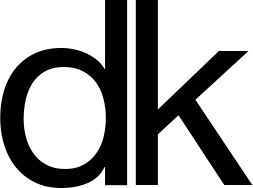
<style>
.page{position:relative;width:253px;height:188px;background:#ffffff}
.page>*{position:absolute;margin:0}
.t1{font:258.6px "HelveticaNeue";color:#010100}
</style>
<div class="page">
<p class="t1" style="left:0px;top:0px;width:128px;height:188px">d</p>
<p class="t1" style="left:135px;top:0px;width:118px;height:185px">k</p>
</div>
